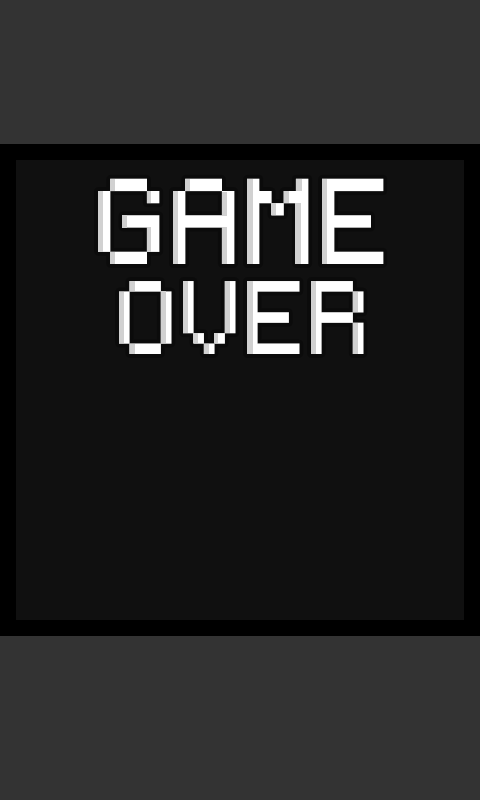
<style>
.page{position:relative;width:480px;height:800px;background:#101010}
.page>*{position:absolute;margin:0}
.t1{font:194.6px "Coder's-Crux";color:#ffffff}
.t2{font:166.6px "Coder's-Crux";color:#ffffff}
</style>
<div class="page">
<p class="t1" style="left:98px;top:178px;width:286px;height:86px">GAME</p>
<p class="t2" style="left:119px;top:281px;width:245px;height:73px">OVER</p>
</div>
